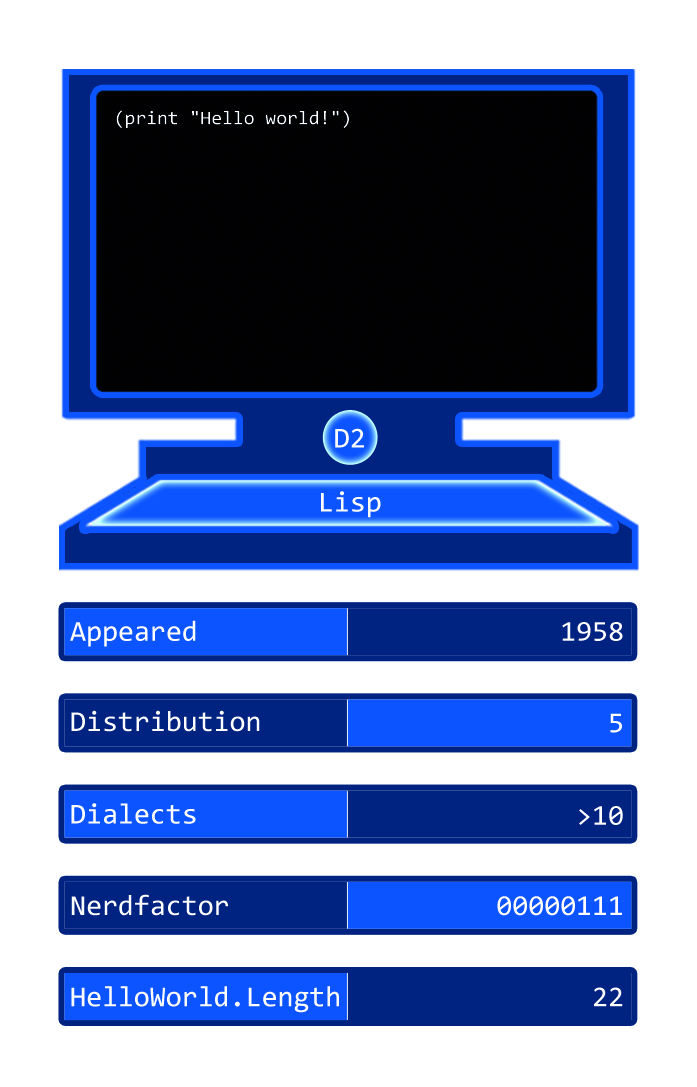
<style>
.page{position:relative;width:697px;height:1087px;background:#ffffff}
.page>*{position:absolute;margin:0}
.t1{font:19.3px "Consolas";color:#ffffff}
.t2{font:29px "Consolas";color:#ffffff}
</style>
<div class="page">
<p class="t1" style="left:116px;top:110px;width:233px;height:19px">(print "Hello world!")</p>
<p class="t2" style="left:335px;top:428px;width:29px;height:20px">D2</p>
<p class="t2" style="left:321px;top:491px;width:60px;height:27px">Lisp</p>
<p class="t2" style="left:70px;top:620px;width:126px;height:27px">Appeared</p>
<p class="t2" style="left:562px;top:622px;width:61px;height:19px">1958</p>
<p class="t2" style="left:71px;top:710px;width:189px;height:22px">Distribution</p>
<p class="t2" style="left:610px;top:713px;width:12px;height:20px">5</p>
<p class="t2" style="left:71px;top:803px;width:125px;height:21px">Dialects</p>
<p class="t2" style="left:579px;top:806px;width:44px;height:19px">&gt;10</p>
<p class="t2" style="left:71px;top:894px;width:157px;height:22px">Nerdfactor</p>
<p class="t2" style="left:497px;top:896px;width:125px;height:20px">00000111</p>
<p class="t2" style="left:71px;top:986px;width:268px;height:27px">HelloWorld.Length</p>
<p class="t2" style="left:594px;top:987px;width:29px;height:20px">22</p>
</div>
